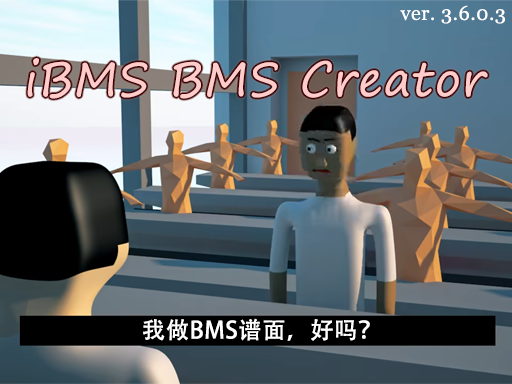
<style>
.page{position:relative;width:512px;height:384px}
.page>*{position:absolute;margin:0}
.t1{font:20px "Georgia";letter-spacing:0.025em;color:#ffffff}
.t2{font:46.3px "SegoePrint";letter-spacing:0.025em;color:#ffcccc}
.t3{font:23.3px "AdobeHeitiStd-Regular";letter-spacing:0.025em;color:#ffffff}
</style>
<div class="page">
<p class="t1" style="left:400px;top:5px;width:105px;height:19px">ver. 3.6.0.3</p>
<p class="t2" style="left:27px;top:58px;width:461px;height:41px">iBMS BMS Creator</p>
<p class="t3" style="left:143px;top:318px;width:227px;height:23px">我做BMS谱面，好吗？</p>
</div>
